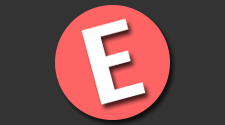
<style>
.page{position:relative;width:225px;height:125px;background:#333333}
.page>*{position:absolute;margin:0}
.t1{font:109.5px "BebasNeue-Regular";color:#ffffff;scale:1.38 1}
</style>
<div class="page">
<p class="t1" style="left:81px;top:18px;width:65px;height:87px;rotate:-15deg">e</p>
</div>
